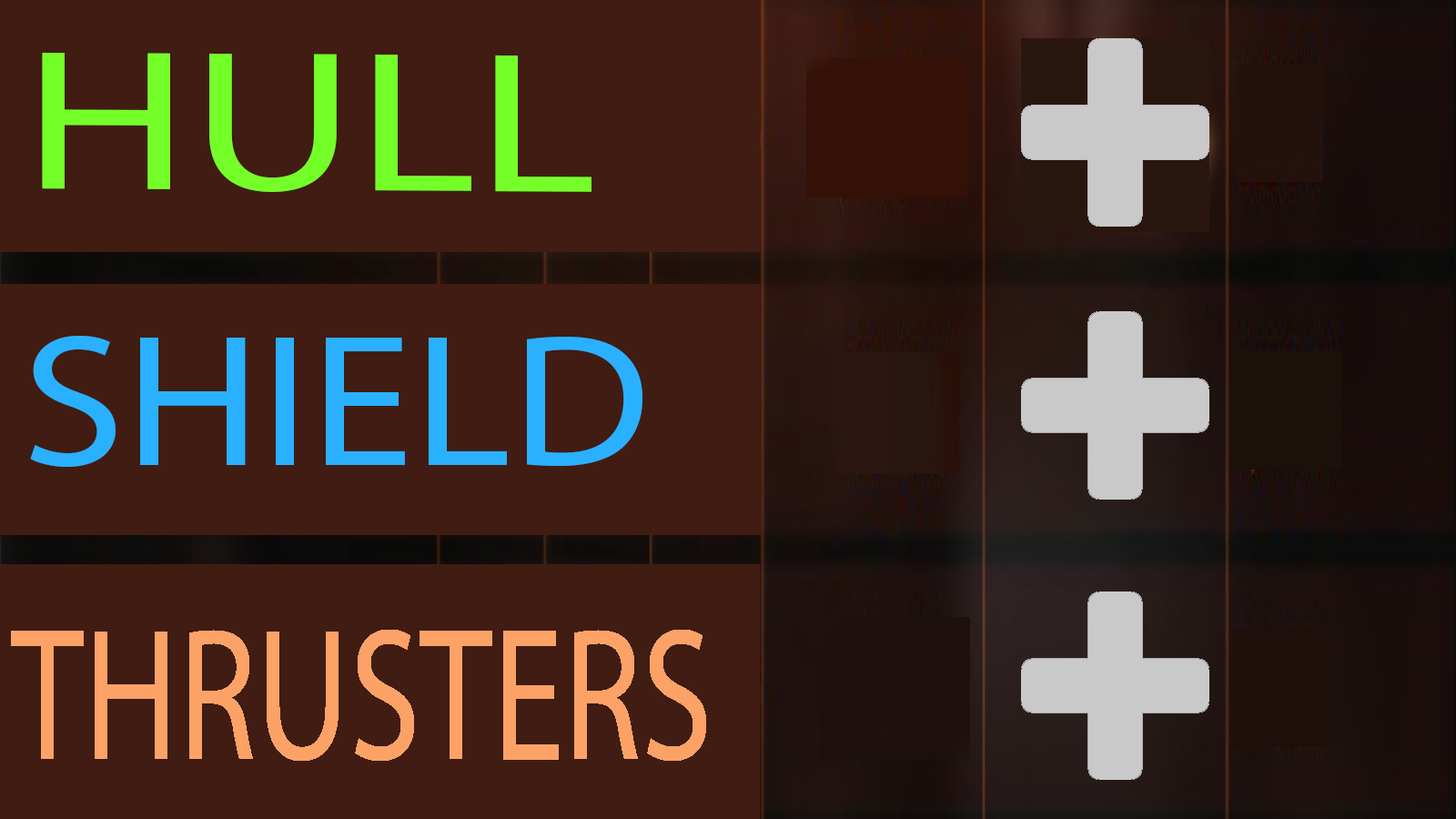
<style>
.page{position:relative;width:1456px;height:819px;background:#401c13}
.page>*{position:absolute;margin:0}
.t1{font:201.3px "MyriadPro-Regular";color:#75ff29;scale:1.27 1}
.t2{font:188.5px "MyriadPro-Regular";color:#29b1ff;scale:1.11 1}
</style>
<div class="page">
<p class="t1" style="left:42px;top:52px;width:549px;height:140px">HULL</p>
<p class="t2" style="left:30px;top:335px;width:612px;height:133px">SHIELD</p>
</div>
